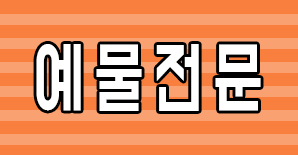
<style>
.page{position:relative;width:298px;height:155px;background:#f87f3d}
.page>*{position:absolute;margin:0}
.t1{font:70.1px "BMDoHyeon";letter-spacing:-0.07em;color:#ffffff;scale:0.74 1}
</style>
<div class="page">
<p class="t1" style="left:36px;top:44px;width:225px;height:67px">예 물 전 문</p>
</div>
